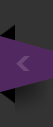
<style>
.page{position:relative;width:53px;height:127px;background:#333333}
.page>*{position:absolute;margin:0}
.t1{font:40px "Cabin-Bold";color:#6c4878}
</style>
<div class="page">
<p class="t1" style="left:16px;top:55px;width:15px;height:17px">&lt;</p>
</div>
